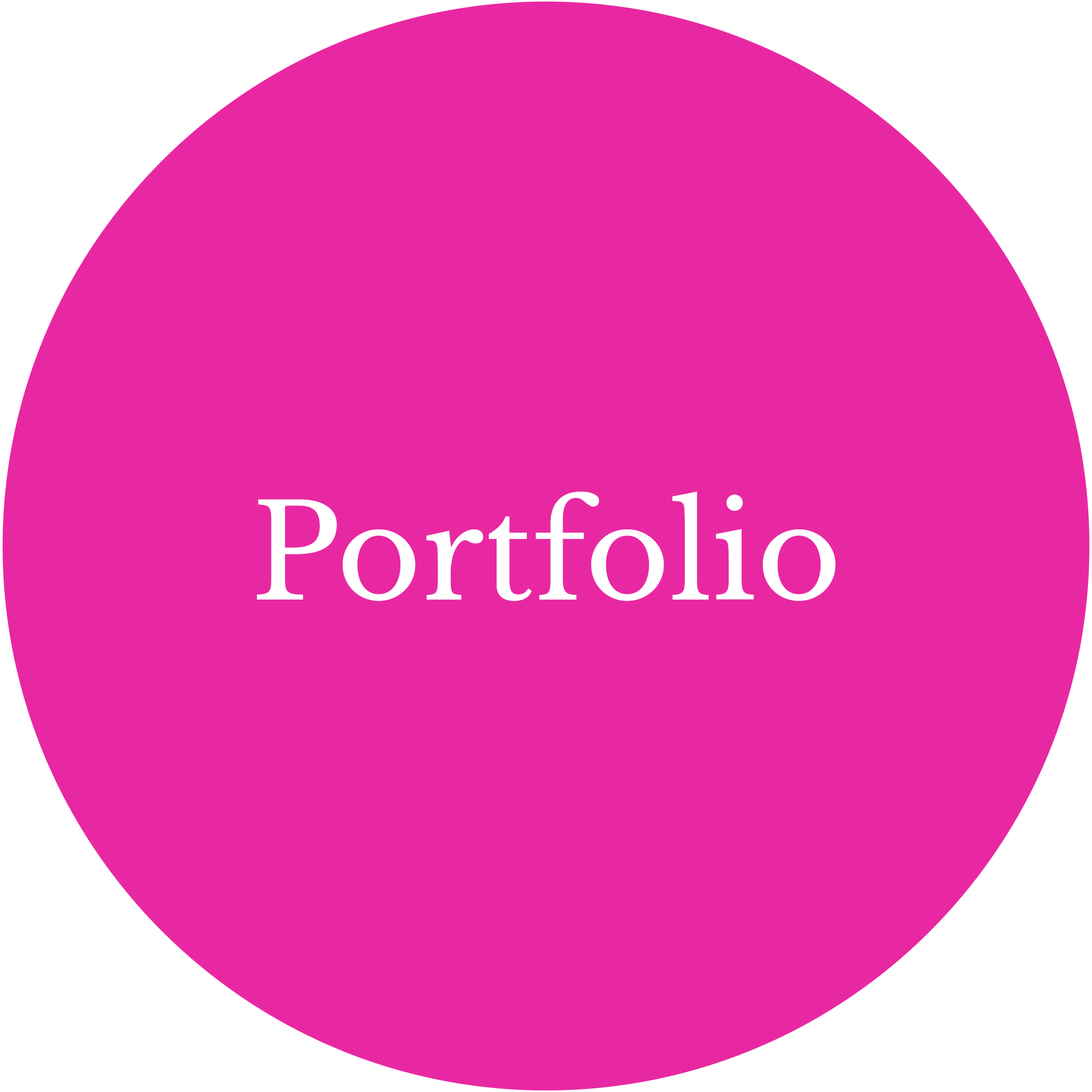
<style>
.page{position:relative;width:1092px;height:1092px;background:#e828a2}
.page>*{position:absolute;margin:0}
.t1{font:130px "LibreBaskerville-Regular";color:#ffffff}
</style>
<div class="page">
<p class="t1" style="left:257px;top:491px;width:579px;height:110px">Portfolio</p>
</div>
